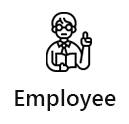
<style>
.page{position:relative;width:129px;height:124px;background:#ffffff}
.page>*{position:absolute;margin:0}
.t1{font:23.2px "YuGothicUI-Semibold";color:#111111}
</style>
<div class="page">
<p class="t1" style="left:15px;top:89px;width:101px;height:22px">Employee</p>
</div>
